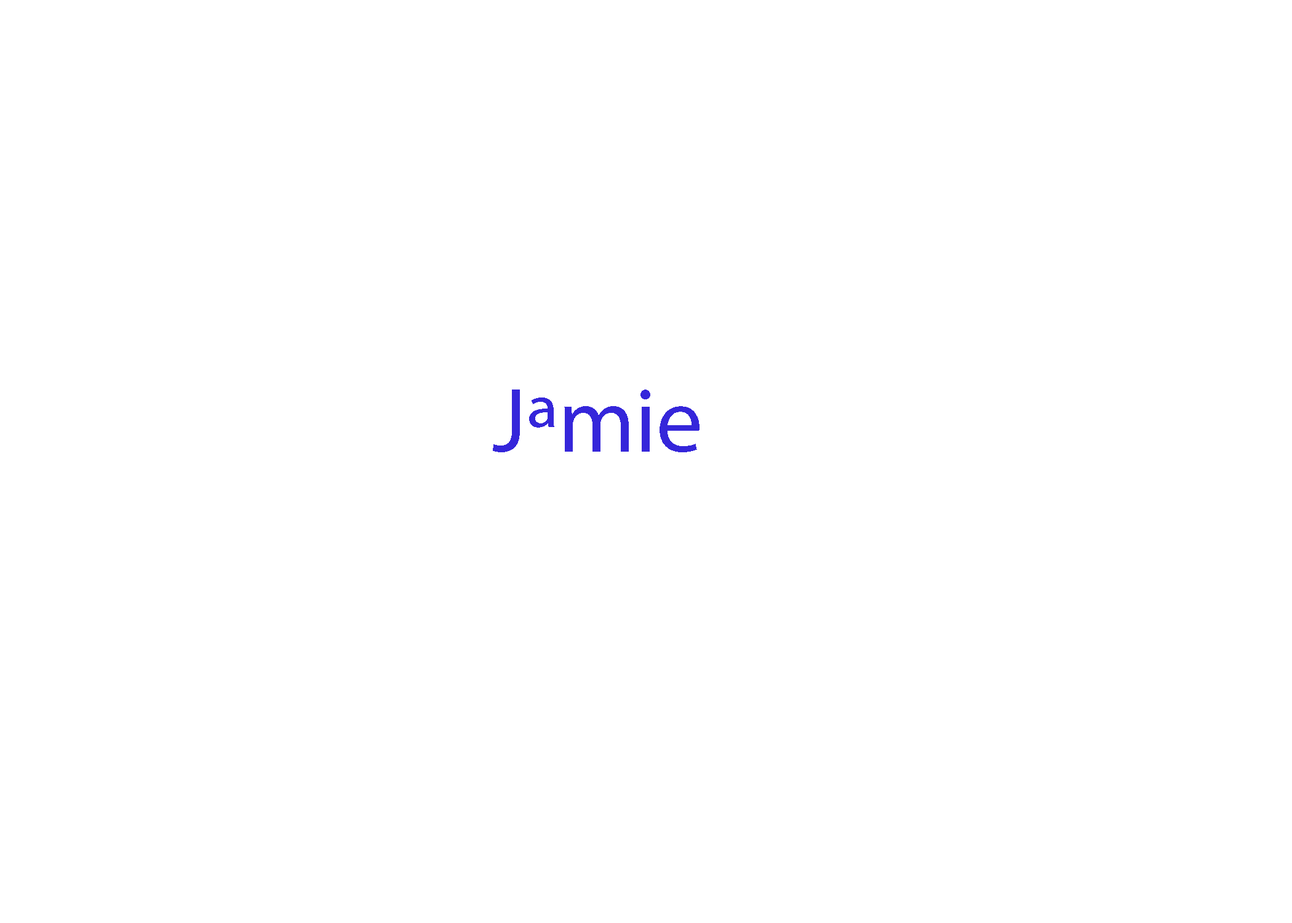
<style>
.page{position:relative;width:1292px;height:923px;background:#ffffff}
.page>*{position:absolute;margin:0}
.t1{font:92.3px "MyriadPro-Regular";color:#3526da}
</style>
<div class="page">
<p class="t1" style="left:493px;top:389px;width:207px;height:63px">Jamie</p>
</div>
